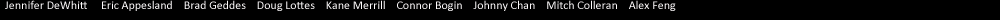
<style>
.page{position:relative;width:1000px;height:20px;background:#000000}
.page>*{position:absolute;margin:0}
.t1{font:12px "Calibri";color:#fefbfc}
</style>
<div class="page">
<p class="t1" style="left:5px;top:0px;width:671px;height:11px">Jennifer DeWhitt     Eric Appesland    Brad Geddes    Doug Lottes    Kane Merrill    Connor Bogin    Johnny Chan    Mitch Colleran    Alex Feng</p>
</div>
